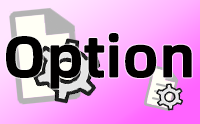
<style>
.page{position:relative;width:200px;height:124px}
.page>*{position:absolute;margin:0}
.t1{font:56.4px "AlibabaPuHuiTiM";color:#010000;font-weight:bold}
</style>
<div class="page">
<p class="t1" style="left:6px;top:33px;width:186px;height:56px">Option</p>
</div>
